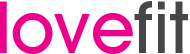
<style>
.page{position:relative;width:190px;height:54px;background:#ffffff}
.page>*{position:absolute;margin:0}
.t1{font:72.4px "AvantGardeITCbyBT-Medium";letter-spacing:-0.01em;color:#ec008c}
.t2{font:72.4px "AvantGardeITCbyBT-Medium";letter-spacing:-0.01em;color:#464646}
</style>
<div class="page">
<p class="t1" style="left:0px;top:1px;width:188px;height:53px">love<span class="t2">fit</span></p>
</div>
